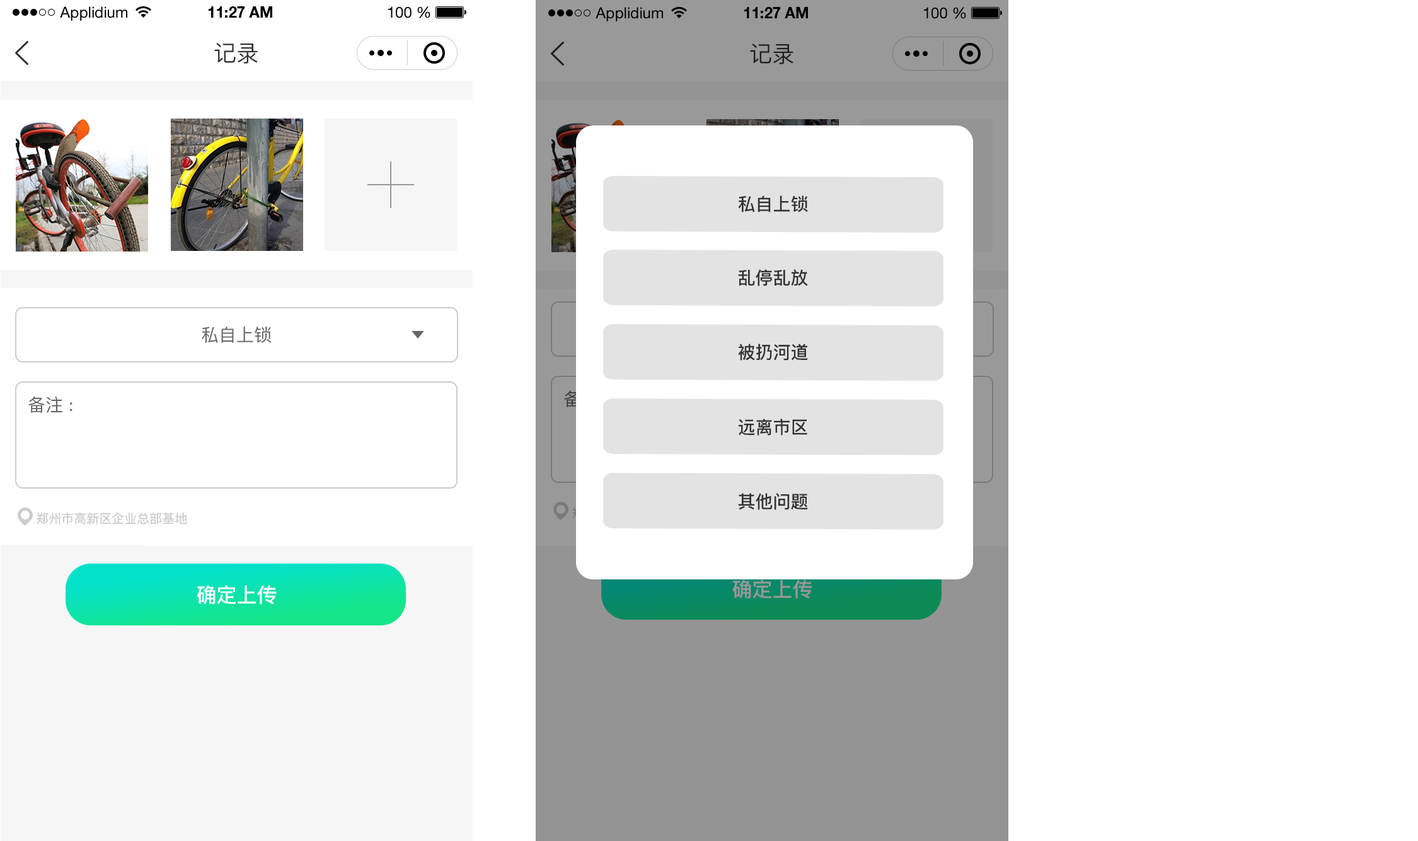
<style>
.page{position:relative;width:1418px;height:841px;background:#ffffff}
.page>*{position:absolute;margin:0}
.t1{font:15.1px "HelveticaNeueLTStd-Roman";color:#000000}
.t2{font:15.1px "HelveticaNeueLTStd-Bd";color:#000000}
.t3{font:22.7px "PingFangSC-Regular";color:#333333}
.t4{font:17.6px "PingFangSC-Medium";color:#333333}
.t5{font:17.6px "PingFangSC-Regular";color:#666666}
.t6{font:17.6px "PingFangSC-Regular"}
.t7{font:12.6px "PingFangSC-Medium";color:#cccccc}
.t8{font:20.2px "PingFangSC-Medium";color:#989898}
.t9{font:20.2px "PingFangSC-Medium";color:#fefefe}
</style>
<div class="page">
<p class="t1" style="left:60px;top:6px;width:67px;height:15px">Applidium</p>
<p class="t2" style="left:208px;top:6px;width:64px;height:12px">11:27 AM</p>
<p class="t1" style="left:388px;top:6px;width:42px;height:12px">100 %</p>
<p class="t1" style="left:596px;top:7px;width:67px;height:14px">Applidium</p>
<p class="t2" style="left:744px;top:7px;width:64px;height:11px">11:27 AM</p>
<p class="t1" style="left:924px;top:7px;width:42px;height:12px">100 %</p>
<p class="t3" style="left:214px;top:43px;width:44px;height:21px">记录</p>
<p class="t3" style="left:750px;top:43px;width:44px;height:21px">记录</p>
<p class="t4" style="left:738px;top:195px;width:70px;height:17px">私自上锁</p>
<p class="t4" style="left:738px;top:269px;width:70px;height:17px">乱停乱放</p>
<p class="t5" style="left:202px;top:326px;width:69px;height:17px">私自上锁</p>
<p class="t4" style="left:738px;top:344px;width:70px;height:17px">被扔河道</p>
<p class="t5" style="left:28px;top:396px;width:44px;height:17px">备注 :</p>
<p class="t6" style="left:564px;top:390px;width:44px;height:17px">备注 :</p>
<p class="t4" style="left:739px;top:419px;width:68px;height:17px">远离市区</p>
<p class="t4" style="left:738px;top:493px;width:70px;height:17px">其他问题</p>
<p class="t7" style="left:37px;top:512px;width:150px;height:12px">郑州市高新区企业总部基地</p>
<p class="t8" style="left:732px;top:579px;width:80px;height:20px">确定上传</p>
<p class="t9" style="left:197px;top:585px;width:80px;height:19px">确定上传</p>
</div>
